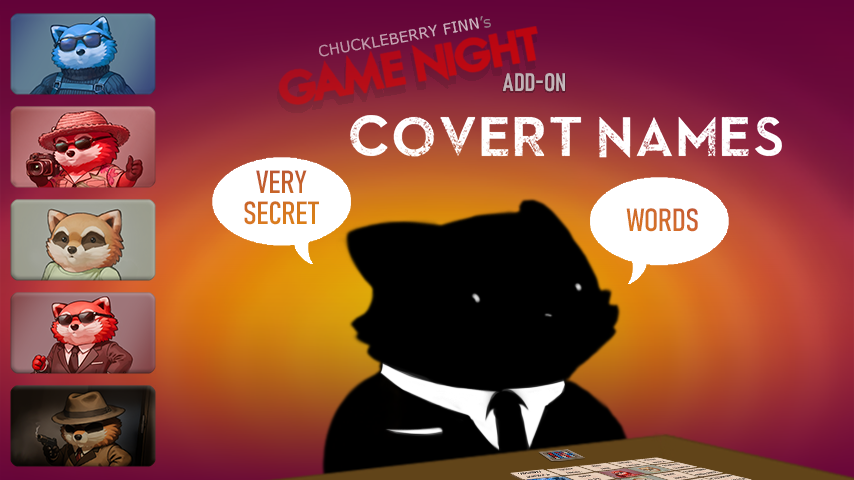
<style>
.page{position:relative;width:854px;height:480px}
.page>*{position:absolute;margin:0}
.t1{font:15px "Verdana";color:#c6a1b3}
.t2{font:25px "Bahnschrift-SemiBoldCondensed";color:#c2b2b7}
.t3{font:31.6px/31.6px "Bahnschrift-Condensed";color:#d17024}
.t4{font:31.6px "Bahnschrift-Condensed";color:#d16c2d}
</style>
<div class="page">
<p class="t1" style="left:319px;top:16px;width:172px;height:41px;rotate:-10deg">CHUCKLEBERRY FINN’s</p>
<p class="t2" style="left:502px;top:73px;width:63px;height:19px">ADD-ON</p>
<p class="t3" style="left:244px;top:170px;width:75px;height:55px;text-align:center">VERY<br>SECRET</p>
<p class="t4" style="left:626px;top:208px;width:72px;height:24px">WORDS</p>
</div>
